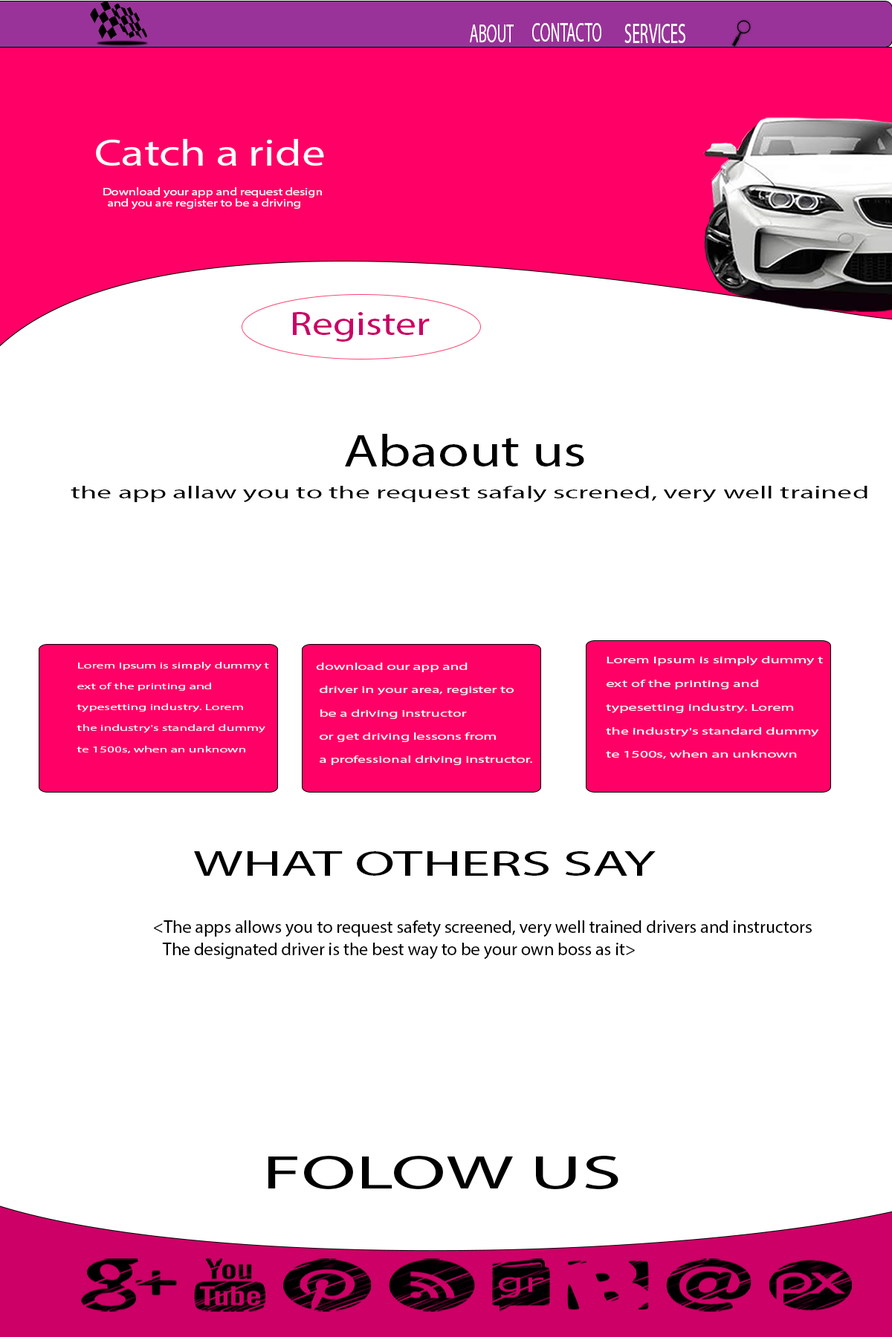
<style>
.page{position:relative;width:892px;height:1337px;background:#ffffff}
.page>*{position:absolute;margin:0}
.t1{font:26.3px "MyriadPro-Regular";color:#ffffff;scale:0.56 1}
.t2{font:26.7px "MyriadPro-Regular";color:#ffffff;scale:0.56 1}
.t3{font:28.1px "MyriadPro-Regular";color:#ffffff;scale:0.56 1}
.t4{font:37.5px "MyriadPro-Regular";color:#ffffff;scale:1.25 1}
.t5{font:10.7px "MyriadPro-Regular";color:#ffffff;scale:1.25 1}
.t6{font:33.1px "MyriadPro-Regular";color:#cc0066;scale:1.25 1}
.t7{font:45.6px "MyriadPro-Regular";color:#000000;scale:1.25 1}
.t8{font:17.9px "MyriadPro-Regular";color:#000000;scale:1.67 1}
.t9{font:8.7px/17.4px "MyriadPro-Regular";color:#ffffff;scale:1.67 1}
.t10{font:9.6px/19.2px "MyriadPro-Regular";color:#ffffff;scale:1.67 1}
.t11{font:9.8px/19.7px "MyriadPro-Regular";color:#ffffff;scale:1.67 1}
.t12{font:35.3px "MyriadPro-Regular";color:#000000;scale:1.67 1}
.t13{font:17.8px "MyriadPro-Regular";color:#000000}
.t14{font:47.9px "MyriadPro-Regular";color:#000000;scale:1.67 1}
</style>
<div class="page">
<p class="t1" style="left:470px;top:25px;width:43px;height:17px">ABOUT</p>
<p class="t2" style="left:532px;top:23px;width:69px;height:19px">CONTACTO</p>
<p class="t3" style="left:624px;top:24px;width:61px;height:19px">SERVICES</p>
<p class="t4" style="left:96px;top:139px;width:228px;height:27px">Catch a ride</p>
<p class="t5" style="left:103px;top:187px;width:219px;height:11px">Download your app and request design</p>
<p class="t5" style="left:108px;top:198px;width:192px;height:12px">and you are register to be a driving</p>
<p class="t6" style="left:293px;top:312px;width:136px;height:30px">Register</p>
<p class="t7" style="left:345px;top:434px;width:239px;height:33px">Abaout us</p>
<p class="t8" style="left:71px;top:486px;width:796px;height:16px">the app allaw you to the request safaly screned, very well trained</p>
<p class="t9" style="left:77px;top:662px;width:192px;height:91px">Lorem Ipsum is simply dummy t<br>ext of the printing and <br>typesetting industry. Lorem<br>the industry's standard dummy <br>te 1500s, when an unknown</p>
<p class="t10" style="left:316px;top:663px;width:216px;height:102px">download our app and <br> driver in your area, register to<br> be a driving instructor<br> or get driving lessons from<br> a professional driving instructor.</p>
<p class="t11" style="left:606px;top:656px;width:217px;height:103px">Lorem Ipsum is simply dummy t<br>ext of the printing and <br>typesetting industry. Lorem<br>the industry's standard dummy <br>te 1500s, when an unknown</p>
<p class="t12" style="left:194px;top:851px;width:461px;height:25px">WHAT OTHERS SAY</p>
<p class="t13" style="left:154px;top:921px;width:657px;height:16px">&lt;The apps allows you to request safety screened, very well trained drivers and instructors</p>
<p class="t13" style="left:162px;top:943px;width:473px;height:16px">The designated driver is the best way to be your own boss as it&gt;</p>
<p class="t14" style="left:268px;top:1155px;width:350px;height:35px">FOLOW US</p>
</div>
